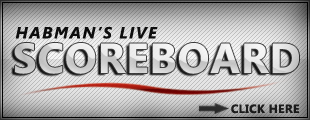
<style>
.page{position:relative;width:310px;height:120px}
.page>*{position:absolute;margin:0}
.t1{font:16px "SegoeUI-BoldItalic";letter-spacing:0.1em;color:#0e0e0e}
.t2{font:42px "SegoeUI-Bold";letter-spacing:0.025em}
.t3{font:12px "SegoeUI-Bold";letter-spacing:0.025em;color:#272727}
</style>
<div class="page">
<p class="t1" style="left:15px;top:26px;width:143px;height:13px">HABMAN’S LIVE</p>
<p class="t2" style="left:14px;top:43px;width:285px;height:31px">SCOREBOARD</p>
<p class="t3" style="left:231px;top:104px;width:68px;height:10px">CLICK HERE</p>
</div>
